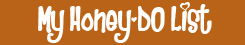
<style>
.page{position:relative;width:245px;height:45px;background:#b96318}
.page>*{position:absolute;margin:0}
.t1{font:28px "Heartbreaker";color:#fffefd}
</style>
<div class="page">
<p class="t1" style="left:38px;top:2px;width:174px;height:41px">My Honey-DO List</p>
</div>
